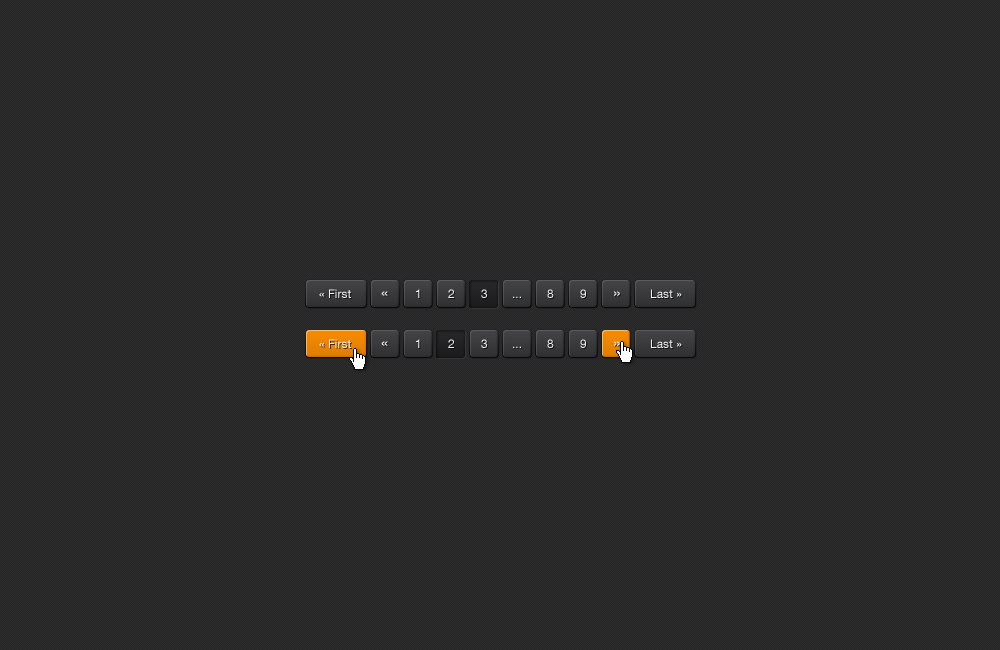
<style>
.page{position:relative;width:1000px;height:650px;background:#262626}
.page>*{position:absolute;margin:0}
.t1{font:12px "HelveticaNeueLTCom-Roman";color:#f2f2f2}
.t2{font:16px "HelveticaNeueLTCom-Roman"}
</style>
<div class="page">
<p class="t1" style="left:319px;top:289px;width:32px;height:9px">« First</p>
<p class="t2" style="left:381px;top:291px;width:7px;height:6px">«</p>
<p class="t1" style="left:416px;top:289px;width:4px;height:9px">1</p>
<p class="t1" style="left:448px;top:289px;width:6px;height:9px">2</p>
<p class="t1" style="left:481px;top:289px;width:6px;height:9px">3</p>
<p class="t1" style="left:547px;top:289px;width:7px;height:9px">8</p>
<p class="t1" style="left:580px;top:289px;width:6px;height:9px">9</p>
<p class="t2" style="left:614px;top:291px;width:6px;height:6px">»</p>
<p class="t1" style="left:651px;top:289px;width:31px;height:9px">Last »</p>
<p class="t1" style="left:513px;top:296px;width:8px;height:2px">...</p>
<p class="t1" style="left:319px;top:339px;width:32px;height:9px">« First</p>
<p class="t2" style="left:381px;top:341px;width:7px;height:6px">«</p>
<p class="t1" style="left:416px;top:339px;width:4px;height:9px">1</p>
<p class="t1" style="left:448px;top:339px;width:6px;height:9px">2</p>
<p class="t1" style="left:481px;top:339px;width:6px;height:9px">3</p>
<p class="t1" style="left:547px;top:339px;width:7px;height:9px">8</p>
<p class="t1" style="left:580px;top:339px;width:6px;height:9px">9</p>
<p class="t2" style="left:614px;top:341px;width:6px;height:6px">»</p>
<p class="t1" style="left:651px;top:339px;width:31px;height:9px">Last »</p>
<p class="t1" style="left:513px;top:346px;width:8px;height:2px">...</p>
</div>
